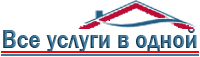
<style>
.page{position:relative;width:200px;height:57px;background:#ffffff}
.page>*{position:absolute;margin:0}
.t1{font:19.4px "FranklinGothic-Demi";scale:0.89 1}
</style>
<div class="page">
<p class="t1" style="left:3px;top:29px;width:194px;height:23px">Все услуги в одной</p>
</div>
